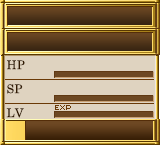
<style>
.page{position:relative;width:160px;height:145px;background:#dfd3c0}
.page>*{position:absolute;margin:0}
.t1{font:12px "CenturySchoolbook";letter-spacing:0.025em;color:#321a02}
</style>
<div class="page">
<p class="t1" style="left:7px;top:60px;width:18px;height:10px">HP</p>
<p class="t1" style="left:7px;top:84px;width:16px;height:10px">SP</p>
<p class="t1" style="left:6px;top:108px;width:18px;height:10px">LV</p>
</div>
